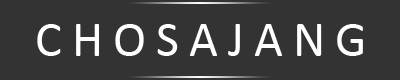
<style>
.page{position:relative;width:400px;height:80px;background:#333333}
.page>*{position:absolute;margin:0}
.t1{font:50px "Calibri";letter-spacing:0.2em;color:#ffffff}
</style>
<div class="page">
<p class="t1" style="left:37px;top:24px;width:326px;height:32px">CHOSAJANG</p>
</div>
